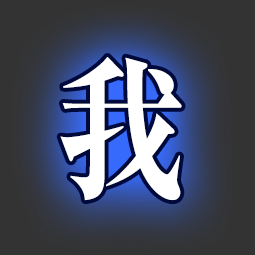
<style>
.page{position:relative;width:255px;height:255px;background:#333333}
.page>*{position:absolute;margin:0}
.t1{font:156px "RyuminPro-ExBold";letter-spacing:-0.08em;color:#ffffff;scale:0.83 1}
</style>
<div class="page">
<p class="t1" style="left:60px;top:57px;width:122px;height:144px">我</p>
</div>
